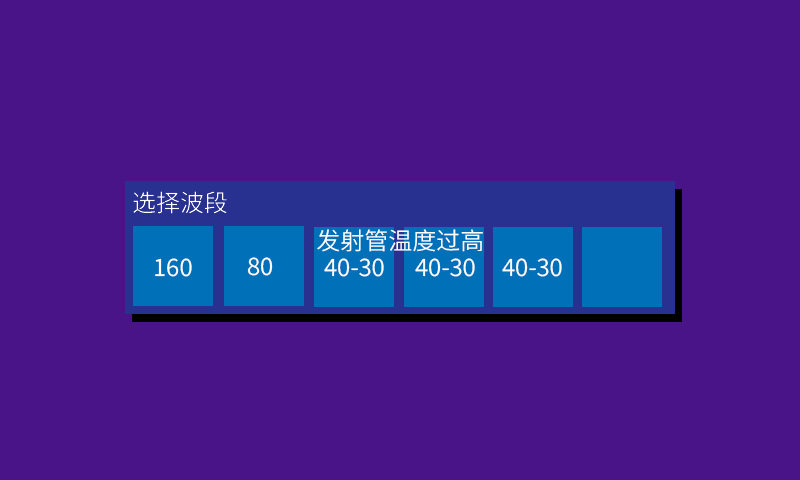
<style>
.page{position:relative;width:800px;height:480px;background:#481488}
.page>*{position:absolute;margin:0}
.t1{font:24px "SourceHanSansCN-Normal";color:#ffffff}
</style>
<div class="page">
<p class="t1" style="left:317px;top:229px;width:166px;height:23px">发射管温度过高</p>
<p class="t1" style="left:247px;top:257px;width:26px;height:19px">80</p>
<p class="t1" style="left:155px;top:258px;width:37px;height:19px">160</p>
<p class="t1" style="left:324px;top:258px;width:60px;height:19px">40-30</p>
<p class="t1" style="left:415px;top:258px;width:60px;height:19px">40-30</p>
<p class="t1" style="left:502px;top:258px;width:60px;height:19px">40-30</p>
</div>
